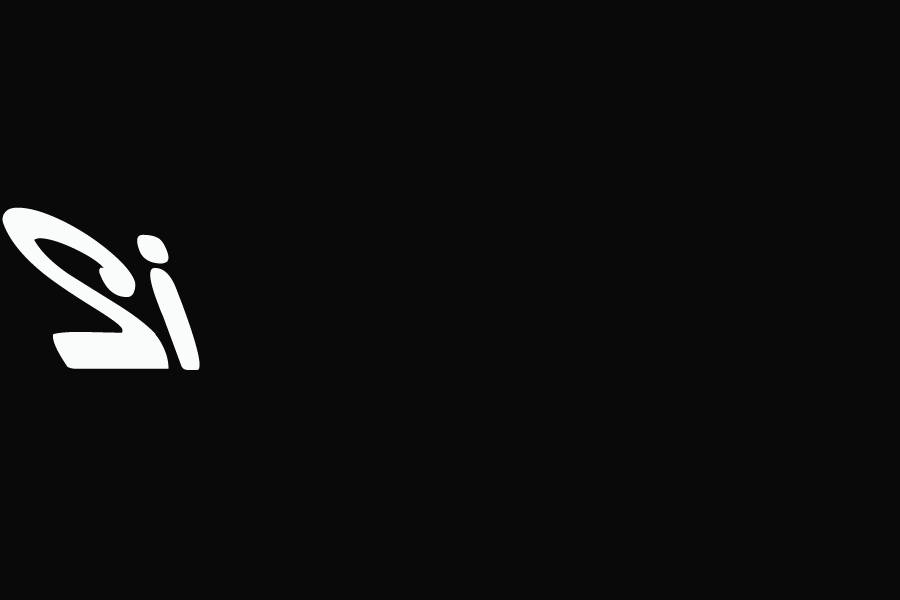
<style>
.page{position:relative;width:900px;height:600px;background:#090909}
.page>*{position:absolute;margin:0}
.t1{font:180px "EncoreNorScriptCasedOblique";color:#fafbfb;scale:1.5 1}
</style>
<div class="page">
<p class="t1" style="left:2px;top:207px;width:198px;height:163px">Si</p>
</div>
